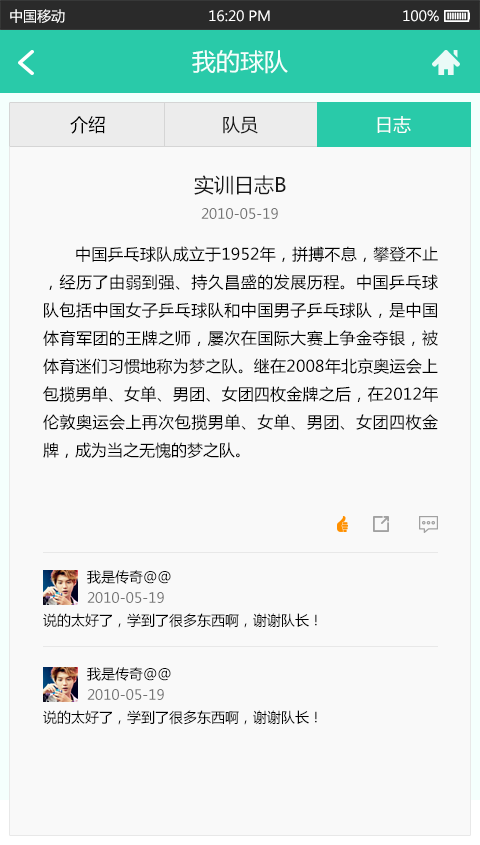
<style>
.page{position:relative;width:480px;height:845px;background:#f9f9f9}
.page>*{position:absolute;margin:0}
.t1{font:14px "MicrosoftYaHei";color:#ffffff}
.t2{font:24px "MicrosoftYaHei";color:#f4fffd}
.t3{font:18px "MicrosoftYaHei";color:#000000}
.t4{font:18px "MicrosoftYaHei";color:#191919}
.t5{font:18px "MicrosoftYaHei";color:#ffffff}
.t6{font:20px "MicrosoftYaHei";color:#191919}
.t7{font:14px "MicrosoftYaHei";color:#737373}
.t8{font:16px "MicrosoftYaHei";color:#000000}
.t9{font:14px "MicrosoftYaHei";color:#000000}
</style>
<div class="page">
<p class="t1" style="left:10px;top:9px;width:55px;height:14px">中国移动</p>
<p class="t1" style="left:209px;top:10px;width:61px;height:12px">16:20 PM</p>
<p class="t1" style="left:403px;top:10px;width:36px;height:12px">100%</p>
<p class="t2" style="left:192px;top:50px;width:96px;height:24px">我的球队</p>
<p class="t3" style="left:70px;top:116px;width:35px;height:18px">介绍</p>
<p class="t4" style="left:223px;top:116px;width:35px;height:18px">队员</p>
<p class="t5" style="left:377px;top:116px;width:34px;height:17px">日志</p>
<p class="t6" style="left:194px;top:175px;width:92px;height:20px">实训日志B</p>
<p class="t7" style="left:201px;top:208px;width:77px;height:11px">2010-05-19</p>
<p class="t8" style="left:43px;top:246px;width:395px;height:213px;text-align:justify">中国乒乓球队成立于1952年，拼搏不息，攀登不止，经历了由弱到强、持久昌盛的发展历程。中国乒乓球队包括中国女子乒乓球队和中国男子乒乓球队，是中国体育军团的王牌之师，屡次在国际大赛上争金夺银，被体育迷们习惯地称为梦之队。继在2008年北京奥运会上包揽男单、女单、男团、女团四枚金牌之后，在2012年伦敦奥运会上再次包揽男单、女单、男团、女团四枚金牌，成为当之无愧的梦之队。</p>
<p class="t9" style="left:87px;top:570px;width:84px;height:14px">我是传奇@@</p>
<p class="t7" style="left:87px;top:592px;width:77px;height:11px">2010-05-19</p>
<p class="t9" style="left:43px;top:613px;width:274px;height:15px">说的太好了，学到了很多东西啊，谢谢队长！</p>
<p class="t9" style="left:87px;top:667px;width:84px;height:14px">我是传奇@@</p>
<p class="t7" style="left:87px;top:689px;width:77px;height:11px">2010-05-19</p>
<p class="t9" style="left:43px;top:710px;width:274px;height:15px">说的太好了，学到了很多东西啊，谢谢队长！</p>
</div>
